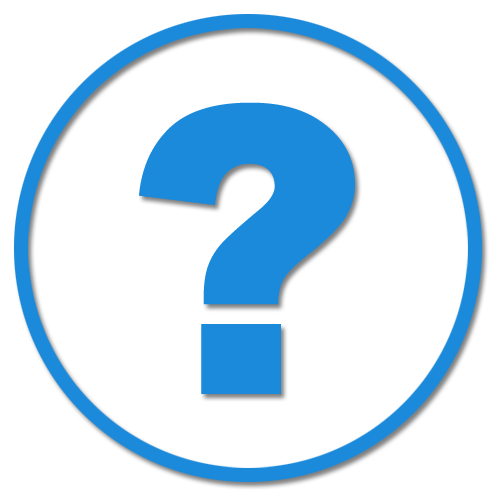
<style>
.page{position:relative;width:497px;height:497px;background:#ffffff}
.page>*{position:absolute;margin:0}
.t1{font:400px "Arial-Black";color:#1c8adb}
</style>
<div class="page">
<p class="t1" style="left:139px;top:102px;width:216px;height:292px">?</p>
</div>
